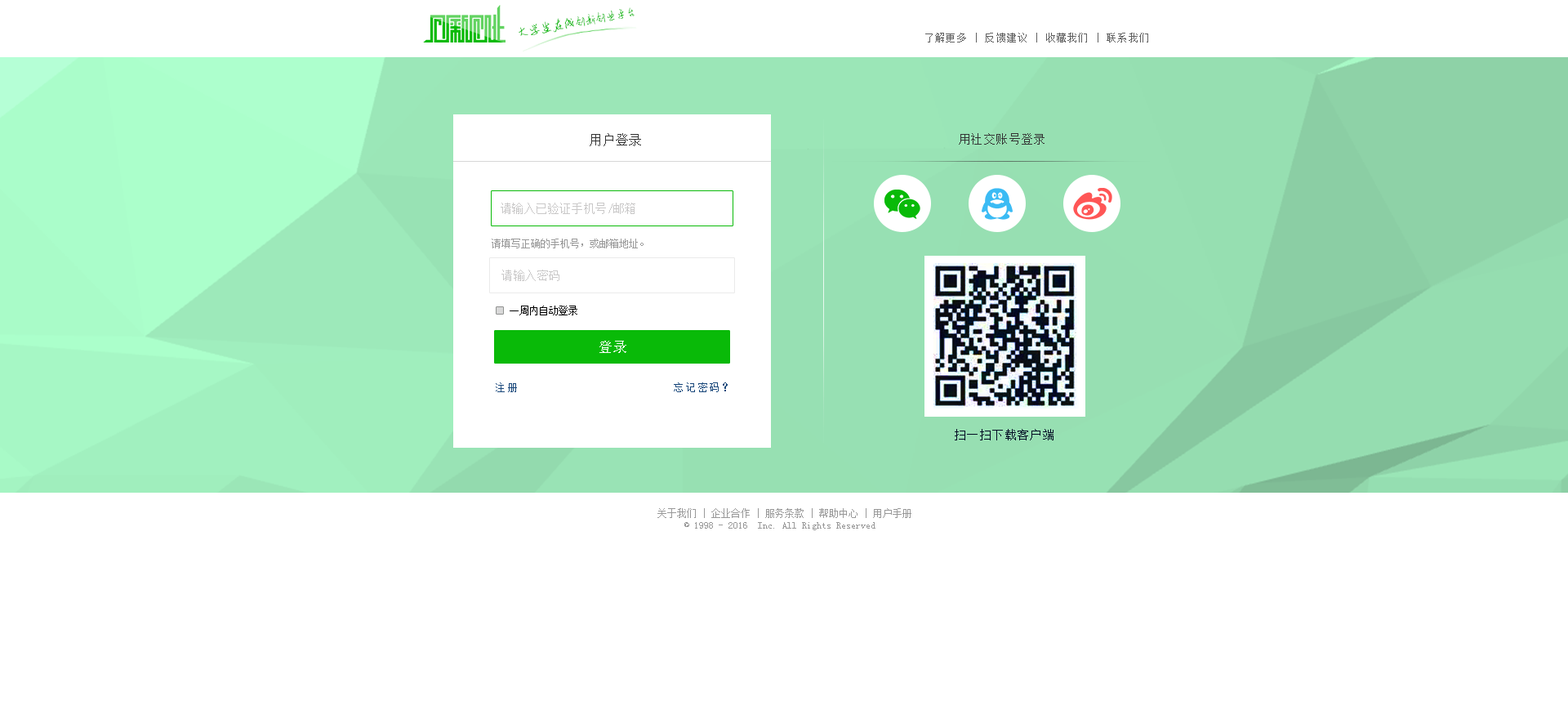
<style>
.page{position:relative;width:1568px;height:728px;background:#ffffff}
.page>*{position:absolute;margin:0}
.t1{font:11.2px "AnJingCheng-Xing-2.0";letter-spacing:-0.01em;color:#09ba08}
.t2{font:12.6px "AnJingCheng-Xing-2.0";letter-spacing:-0.01em;color:#09ba08}
.t3{font:9.8px "SimSun";letter-spacing:0.1em;color:#606060}
.t4{font:13.1px "SimSun";color:#333333}
.t5{font:11.4px "SimSun";letter-spacing:0.1em;color:#333333}
.t6{font:11.4px "SimSun";color:#c9c8c8}
.t7{font:9.8px "SimSun";color:#999999}
.t8{font:9.8px "SimSun";color:#000000}
.t9{font:14.7px "SimSun";color:#ffffff}
.t10{font:10.6px "SimSun";letter-spacing:0.1em;color:#1a487b}
.t11{font:11.4px "SimSun";letter-spacing:0.1em;color:#010a23}
</style>
<div class="page">
<p class="t1" style="left:519px;top:7px;width:116px;height:29px;rotate:-10deg"><span class="t2">大学生在线</span>创新创业平台</p>
<p class="t3" style="left:925px;top:33px;width:223px;height:9px">了解更多 | 反馈建议 | 收藏我们 | 联系我们</p>
<p class="t4" style="left:590px;top:133px;width:51px;height:13px">用户登录</p>
<p class="t5" style="left:959px;top:133px;width:86px;height:12px">用社交账号登录</p>
<p class="t6" style="left:501px;top:203px;width:134px;height:11px">请输入已验证手机号/邮箱</p>
<p class="t7" style="left:492px;top:238px;width:152px;height:10px">请填写正确的手机号，或邮箱地址。</p>
<p class="t6" style="left:501px;top:270px;width:58px;height:11px">请输入密码</p>
<p class="t8" style="left:510px;top:305px;width:67px;height:10px">一周内自动登录</p>
<p class="t9" style="left:599px;top:341px;width:27px;height:12px">登录</p>
<p class="t10" style="left:496px;top:382px;width:21px;height:10px">注册</p>
<p class="t10" style="left:674px;top:382px;width:54px;height:10px">忘记密码？</p>
<p class="t11" style="left:955px;top:429px;width:99px;height:11px">扫一扫下载客户端</p>
<p class="t7" style="left:657px;top:508px;width:254px;height:22px;text-align:center">关于我们 | 企业合作 | 服务条款 | 帮助中心 | 用户手册<br>© 1998 - 2016  Inc. All Rights Reserved</p>
</div>
